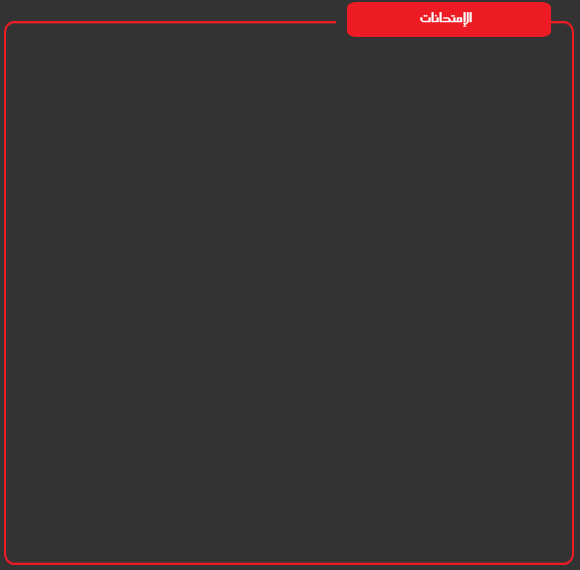
<style>
.page{position:relative;width:580px;height:570px;background:#333333}
.page>*{position:absolute;margin:0}
.t1{font:16px "SC_KHALID";color:#ffffff}
</style>
<div class="page">
<p class="t1" style="left:420px;top:12px;width:52px;height:15px">الإمتحانات</p>
</div>
